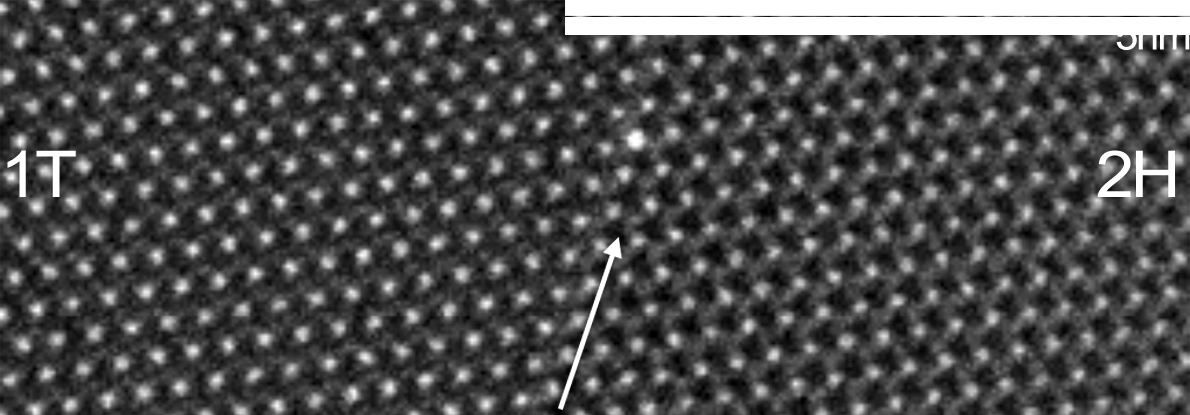
<style>
.page{position:relative;width:1190px;height:415px}
.page>*{position:absolute;margin:0}
.t1{font:38.8px "ArialMT";letter-spacing:-0.05em;color:#ffffff;scale:1.07 1}
.t2{font:64.4px "ArialMT";letter-spacing:-0.05em;color:#ffffff;scale:1.07 1}
</style>
<div class="page">
<p class="t1" style="left:1116px;top:22px;width:74px;height:28px">5nm</p>
<p class="t2" style="left:7px;top:150px;width:1168px;height:47px">1T                              2H</p>
</div>
